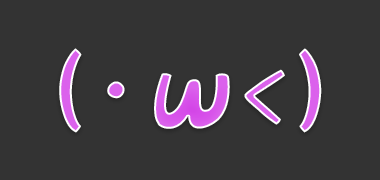
<style>
.page{position:relative;width:380px;height:180px;background:#333333}
.page>*{position:absolute;margin:0}
.t1{font:100px "KFhimaji"}
</style>
<div class="page">
<p class="t1" style="left:59px;top:48px;width:263px;height:85px">(·ω&lt;)</p>
</div>
